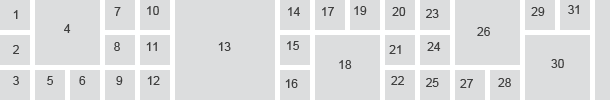
<style>
.page{position:relative;width:610px;height:100px;background:#dcddde}
.page>*{position:absolute;margin:0}
.t1{font:12px "ArialMT";color:#3f3f3f}
</style>
<div class="page">
<p class="t1" style="left:147px;top:6px;width:12px;height:9px">10</p>
<p class="t1" style="left:354px;top:6px;width:13px;height:9px">19</p>
<p class="t1" style="left:568px;top:5px;width:11px;height:9px">31</p>
<p class="t1" style="left:13px;top:10px;width:5px;height:9px">1</p>
<p class="t1" style="left:114px;top:7px;width:7px;height:9px">7</p>
<p class="t1" style="left:288px;top:7px;width:12px;height:9px">14</p>
<p class="t1" style="left:322px;top:7px;width:12px;height:9px">17</p>
<p class="t1" style="left:392px;top:7px;width:14px;height:9px">20</p>
<p class="t1" style="left:426px;top:9px;width:13px;height:9px">23</p>
<p class="t1" style="left:531px;top:7px;width:14px;height:9px">29</p>
<p class="t1" style="left:64px;top:24px;width:7px;height:9px">4</p>
<p class="t1" style="left:477px;top:27px;width:13px;height:9px">26</p>
<p class="t1" style="left:287px;top:41px;width:12px;height:9px">15</p>
<p class="t1" style="left:13px;top:45px;width:6px;height:9px">2</p>
<p class="t1" style="left:114px;top:42px;width:6px;height:9px">8</p>
<p class="t1" style="left:146px;top:42px;width:11px;height:9px">11</p>
<p class="t1" style="left:218px;top:42px;width:13px;height:9px">13</p>
<p class="t1" style="left:389px;top:45px;width:12px;height:9px">21</p>
<p class="t1" style="left:427px;top:42px;width:14px;height:9px">24</p>
<p class="t1" style="left:339px;top:60px;width:13px;height:9px">18</p>
<p class="t1" style="left:551px;top:59px;width:13px;height:9px">30</p>
<p class="t1" style="left:13px;top:76px;width:6px;height:9px">3</p>
<p class="t1" style="left:47px;top:76px;width:6px;height:9px">5</p>
<p class="t1" style="left:79px;top:76px;width:7px;height:9px">6</p>
<p class="t1" style="left:116px;top:76px;width:7px;height:9px">9</p>
<p class="t1" style="left:147px;top:76px;width:13px;height:9px">12</p>
<p class="t1" style="left:391px;top:76px;width:13px;height:9px">22</p>
<p class="t1" style="left:426px;top:78px;width:13px;height:9px">25</p>
<p class="t1" style="left:498px;top:78px;width:13px;height:9px">28</p>
<p class="t1" style="left:285px;top:79px;width:13px;height:9px">16</p>
<p class="t1" style="left:460px;top:79px;width:13px;height:9px">27</p>
</div>
